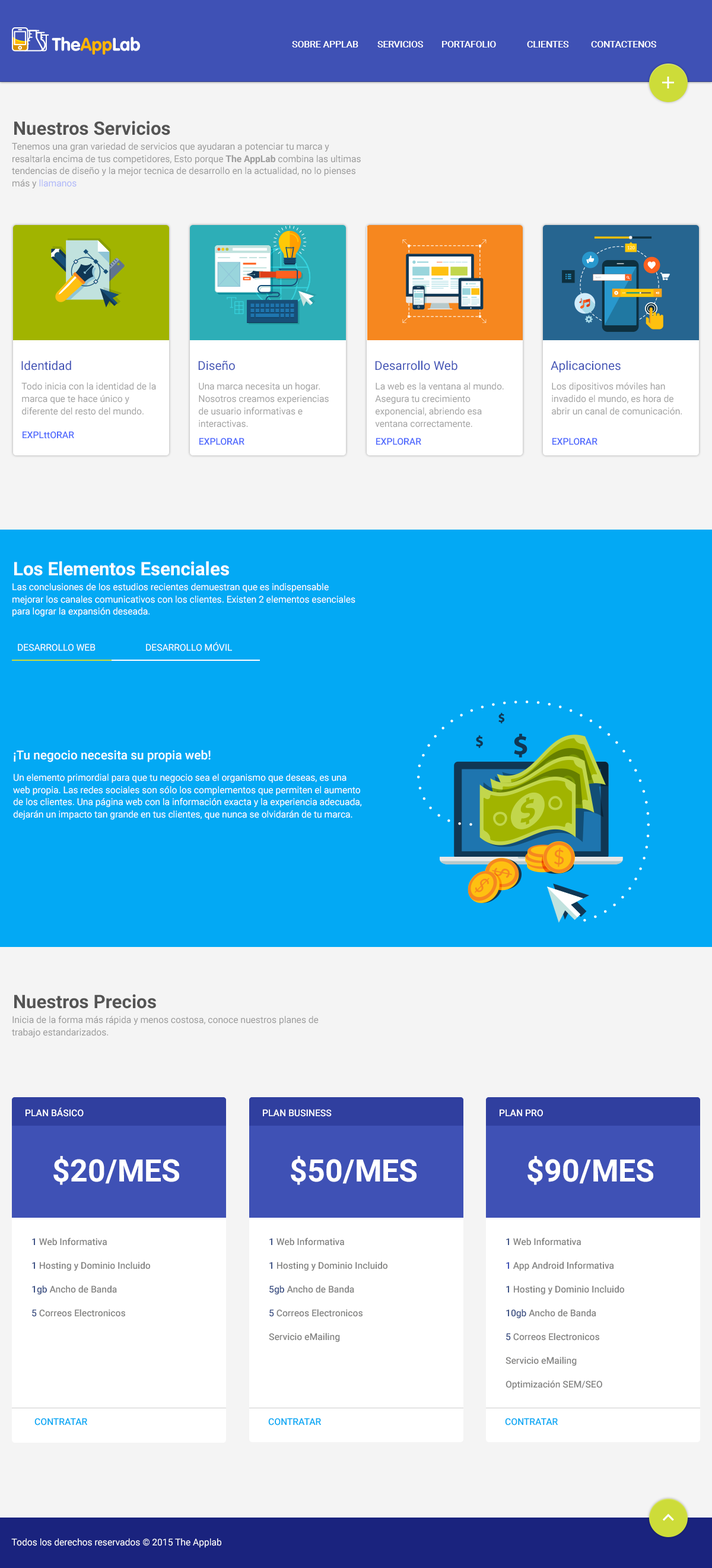
<style>
.page{position:relative;width:712px;height:1568px;background:#f4f4f4}
.page>*{position:absolute;margin:0}
.t1{font:9.3px "Roboto-Medium";color:#ffffff;text-transform:uppercase}
.t2{font:18.6px "Roboto-Bold";color:#545454}
.t3{font:9.3px/12.4px "Roboto-Regular";color:#9b9b9b}
.t4{font:9.3px/12.4px "Roboto-Bold";color:#9b9b9b}
.t5{font:12.4px "Roboto-Regular";color:#3f51b5}
.t6{font:9.3px/12.4px "Roboto-Regular";color:#a3a3a3}
.t7{font:9.3px "Roboto-Medium";color:#526cfd}
.t8{font:18.6px "Roboto-Bold";color:#ffffff}
.t9{font:9.3px/12.4px "Roboto-Regular";color:#ffffff}
.t10{font:9.3px "Roboto-Regular";color:#ffffff}
.t11{font:12.4px "Roboto-Medium";color:#ffffff}
.t12{font:30.9px "Roboto-Bold";color:#ffffff}
.t13{font:9.3px/23.7px "Roboto-Medium";color:#848483}
.t14{font:9.3px/23.7px "Roboto-Medium";color:#415587}
.t15{font:9.3px/23.7px "Roboto-Medium";color:#3f51b5}
.t16{font:9.3px "Roboto-Medium";color:#03a9f4}
</style>
<div class="page">
<p class="t1" style="left:292px;top:41px;width:365px;height:6px">Sobre APPLAB servicios portafolio  clientes  contactenos</p>
<p class="t2" style="left:14px;top:121px;width:156px;height:14px">Nuestros Servicios</p>
<p class="t3" style="left:12px;top:142px;width:349px;height:47px">Tenemos una gran variedad de servicios que ayudaran a potenciar tu marca y resaltarla encima de tus competidores, Esto porque <span class="t4">The AppLab </span>combina las ultimas tendencias de diseño y la mejor tecnica de desarrollo en la actualidad, no lo pienses más y llamanos</p>
<p class="t5" style="left:21px;top:360px;width:50px;height:10px">Identidad</p>
<p class="t5" style="left:198px;top:360px;width:37px;height:10px">Diseño</p>
<p class="t5" style="left:375px;top:360px;width:83px;height:10px">Desarrollo Web</p>
<p class="t5" style="left:551px;top:360px;width:70px;height:13px">Aplicaciones</p>
<p class="t6" style="left:21px;top:382px;width:135px;height:33px">Todo inicia con la identidad de la marca que te hace único y diferente del resto del mundo.</p>
<p class="t6" style="left:199px;top:382px;width:130px;height:45px">Una marca necesita un hogar. Nosotros creamos experiencias de usuario informativas e interactivas.</p>
<p class="t6" style="left:375px;top:382px;width:129px;height:45px">La web es la ventana al mundo. Asegura tu crecimiento exponencial, abriendo esa ventana correctamente.</p>
<p class="t6" style="left:552px;top:382px;width:131px;height:33px">Los dipositivos móviles han invadido el mundo, es hora de abrir un canal de comunicación.</p>
<p class="t7" style="left:23px;top:431px;width:51px;height:8px">EXPLttORAR</p>
<p class="t7" style="left:199px;top:438px;width:46px;height:7px">EXPLORAR</p>
<p class="t7" style="left:376px;top:438px;width:46px;height:7px">EXPLORAR</p>
<p class="t7" style="left:553px;top:438px;width:45px;height:7px">EXPLORAR</p>
<p class="t8" style="left:14px;top:561px;width:215px;height:15px">Los Elementos Esenciales</p>
<p class="t9" style="left:12px;top:583px;width:344px;height:34px">Las conclusiones de los estudios recientes demuestran que es indispensable mejorar los canales comunicativos con los clientes. Existen 2 elementos esenciales para lograr la expansión deseada.</p>
<p class="t10" style="left:18px;top:642px;width:214px;height:9px">DESARROLLO WEB   DESARROLLO MÓVIL</p>
<p class="t11" style="left:14px;top:750px;width:197px;height:12px">¡Tu negocio necesita su propia web!</p>
<p class="t9" style="left:13px;top:774px;width:349px;height:46px">Un elemento primordial para que tu negocio sea el organismo que deseas, es una web propia. Las redes sociales son sólo los complementos que permiten el aumento de los clientes. Una página web con la información exacta y la experiencia adecuada, dejarán un impacto tan grande en tus clientes, que nunca se olvidarán de tu marca.</p>
<p class="t2" style="left:14px;top:994px;width:142px;height:15px">Nuestros Precios</p>
<p class="t3" style="left:12px;top:1016px;width:307px;height:22px">Inicia de la forma más rápida y menos costosa, conoce nuestros planes de trabajo estandarizados.</p>
<p class="t1" style="left:26px;top:1107px;width:58px;height:10px">plan Básico</p>
<p class="t1" style="left:263px;top:1109px;width:69px;height:8px">plan business</p>
<p class="t1" style="left:500px;top:1109px;width:43px;height:8px">plan pro</p>
<p class="t12" style="left:53px;top:1156px;width:127px;height:29px">$20/MES</p>
<p class="t12" style="left:291px;top:1156px;width:126px;height:29px">$50/MES</p>
<p class="t12" style="left:528px;top:1156px;width:126px;height:29px">$90/MES</p>
<p class="t13" style="left:32px;top:1238px;width:118px;height:79px"><span class="t14">1</span> Web Informativa<br><span class="t14">1</span> Hosting y Dominio Incluido<br><span class="t14">1gb</span> Ancho de Banda<br><span class="t14">5</span> Correos Electronicos</p>
<p class="t13" style="left:269px;top:1238px;width:119px;height:104px"><span class="t14">1</span> Web Informativa<br><span class="t14">1</span> Hosting y Dominio Incluido<br><span class="t14">5gb</span> Ancho de Banda<br><span class="t14">5</span> Correos Electronicos<br>Servicio eMailing</p>
<p class="t13" style="left:506px;top:1238px;width:119px;height:152px"><span class="t14">1</span> Web Informativa<br><span class="t15">1</span> App Android Informativa<br><span class="t14">1</span> Hosting y Dominio Incluido<br><span class="t14">10gb</span> Ancho de Banda<br><span class="t14">5</span> Correos Electronicos<br>Servicio eMailing<br>Optimización SEM/SEO</p>
<p class="t16" style="left:34px;top:1418px;width:53px;height:8px">CONTRATAR</p>
<p class="t16" style="left:268px;top:1418px;width:53px;height:8px">CONTRATAR</p>
<p class="t16" style="left:505px;top:1418px;width:53px;height:8px">CONTRATAR</p>
<p class="t10" style="left:11px;top:1538px;width:210px;height:10px">Todos los derechos reservados © 2015 The Applab</p>
</div>
